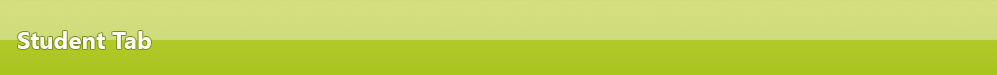
<style>
.page{position:relative;width:997px;height:75px}
.page>*{position:absolute;margin:0}
.t1{font:24px "SegoeUI-Bold";color:#fefefe}
</style>
<div class="page">
<p class="t1" style="left:18px;top:31px;width:133px;height:18px">Student Tab</p>
</div>
